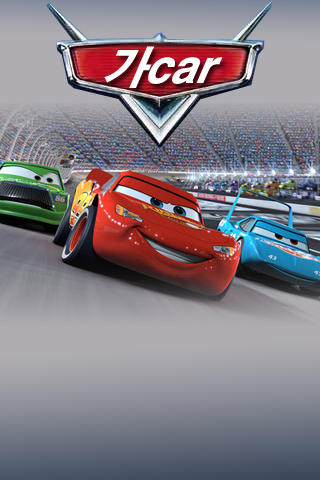
<style>
.page{position:relative;width:320px;height:480px}
.page>*{position:absolute;margin:0}
.t1{font:48px "H2gtrE";letter-spacing:-0.05em;color:#fdfdfd;scale:0.92 1}
</style>
<div class="page">
<p class="t1" style="left:104px;top:46px;width:119px;height:42px">가car</p>
</div>
